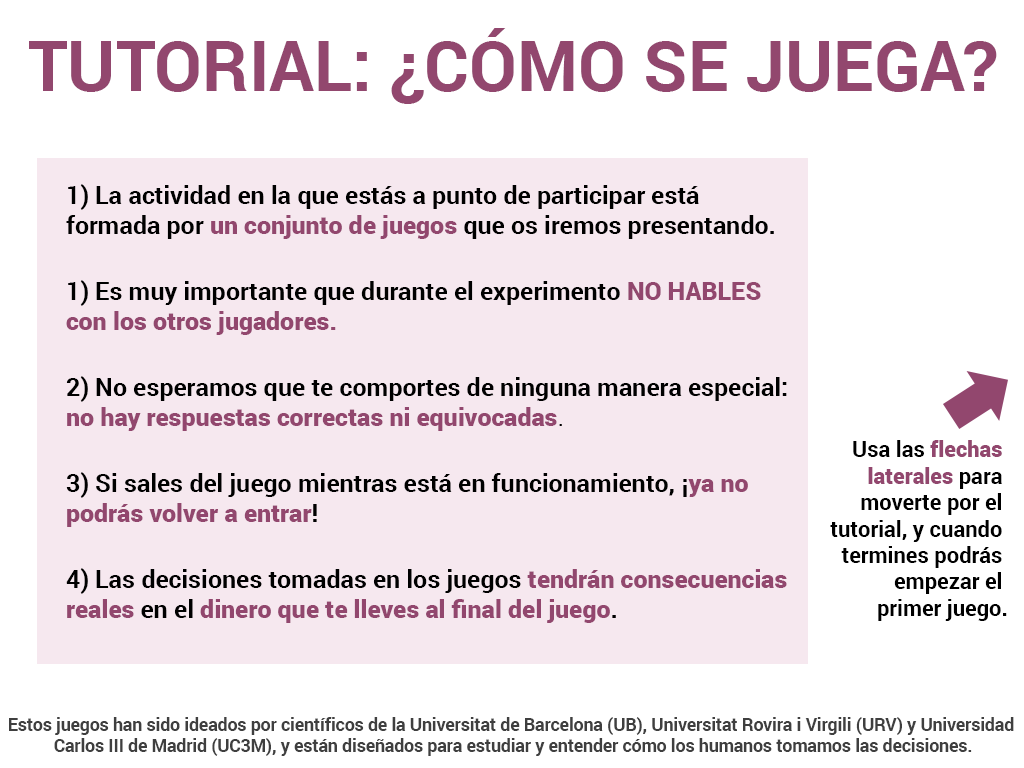
<style>
.page{position:relative;width:1024px;height:768px;background:#ffffff}
.page>*{position:absolute;margin:0}
.t1{font:70px "Roboto-Bold";color:#92476e}
.t2{font:25px "Roboto-Bold";color:#000000}
.t3{font:25px "Roboto-Black";color:#92476e}
.t4{font:25px "Roboto-Regular";color:#000000}
.t5{font:22px "Roboto-Bold";color:#000000}
.t6{font:22px "Roboto-Black";color:#92476e}
.t7{font:17.5px "Roboto-Bold";color:#3f3f3f}
</style>
<div class="page">
<p class="t1" style="left:29px;top:28px;width:968px;height:76px">TUTORIAL: ¿CÓMO SE JUEGA?</p>
<p class="t2" style="left:66px;top:184px;width:721px;height:439px">1) La actividad en la que estás a punto de participar está <br>formada por <span class="t3">un conjunto de juegos</span> que os iremos presentando.<br><br>1) Es muy importante que durante el experimento <span class="t3">NO HABLES <br>con los otros jugadores.<br><br></span>2) No esperamos que te comportes de ninguna manera especial: <br><span class="t3">no hay respuestas correctas ni equivocadas</span><span class="t4">.  <br><br></span>3) Si sales del juego mientras está en funcionamiento, ¡<span class="t3">ya no <br>podrás volver a entrar</span>!<br><br>4) Las decisiones tomadas en los juegos <span class="t3">tendrán consecuencias <br>reales</span> en el <span class="t3">dinero que te lleves al final del juego</span>.</p>
<p class="t5" style="left:830px;top:440px;width:177px;height:181px"><span class="t4"><br><br><br></span>Usa las <span class="t6">flechas <br>laterales </span>para <br>moverte por el <br>tutorial, y cuando <br>termines podrás <br>empezar el <br>primer juego.</p>
<p class="t7" style="left:9px;top:717px;width:1005px;height:39px;text-align:center">Estos juegos han sido ideados por científicos de la Universitat de Barcelona (UB), Universitat Rovira i Virgili (URV) y Universidad <br>Carlos III de Madrid (UC3M), y están diseñados para estudiar y entender cómo los humanos tomamos las decisiones.</p>
</div>
